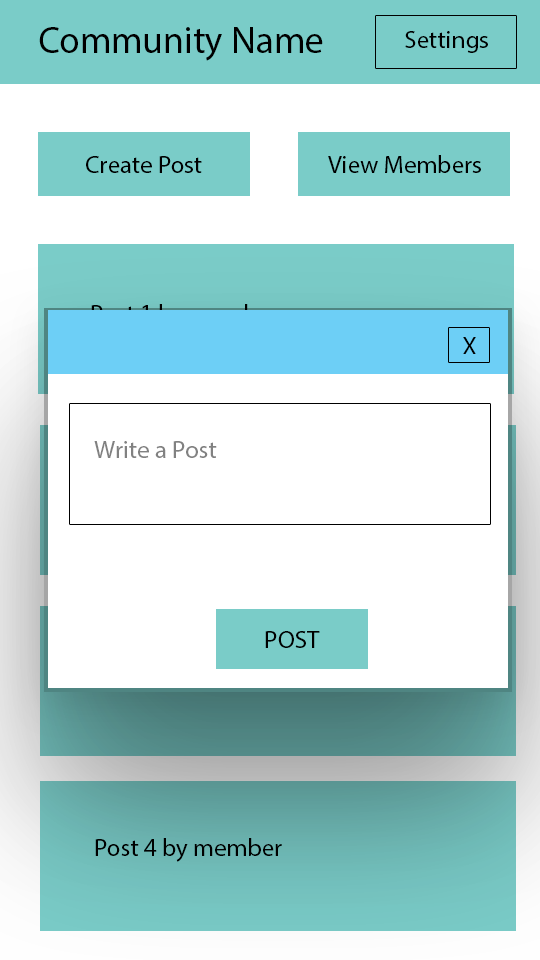
<style>
.page{position:relative;width:540px;height:960px;background:#ffffff}
.page>*{position:absolute;margin:0}
.t1{font:37.5px "MyriadPro-Regular";color:#000000}
.t2{font:25px "MyriadPro-Regular";color:#000000}
.t3{font:25px "MyriadPro-Regular";color:#818181}
</style>
<div class="page">
<p class="t1" style="left:39px;top:27px;width:284px;height:34px">Community Name</p>
<p class="t2" style="left:405px;top:31px;width:83px;height:22px">Settings</p>
<p class="t2" style="left:86px;top:156px;width:116px;height:17px">Create Post</p>
<p class="t2" style="left:328px;top:155px;width:153px;height:18px">View Members</p>
<p class="t2" style="left:463px;top:337px;width:13px;height:17px">X</p>
<p class="t3" style="left:94px;top:441px;width:123px;height:17px">Write a Post</p>
<p class="t2" style="left:265px;top:631px;width:55px;height:17px">POST</p>
<p class="t2" style="left:95px;top:838px;width:187px;height:24px">Post 4 by member</p>
</div>
